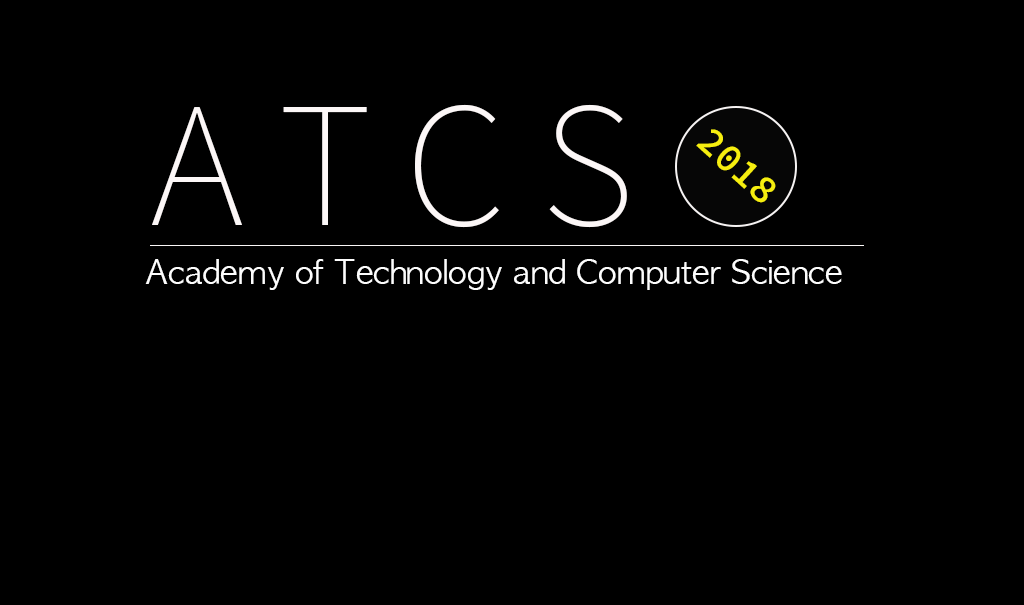
<style>
.page{position:relative;width:1024px;height:605px;background:#000000}
.page>*{position:absolute;margin:0}
.t1{font:180px "SourceSansPro-ExtraLight";color:#fcf7f7}
.t2{font:39.7px "SourceCodePro-Semibold";color:#f6ee0f}
.t3{font:32px "AppleGothic";color:#fdfdfd}
</style>
<div class="page">
<p class="t1" style="left:152px;top:104px;width:475px;height:124px">A T C S</p>
<p class="t2" style="left:696px;top:129px;width:80px;height:74px;rotate:42deg">2018</p>
<p class="t3" style="left:145px;top:259px;width:697px;height:31px">Academy of Technology and Computer Science</p>
</div>
